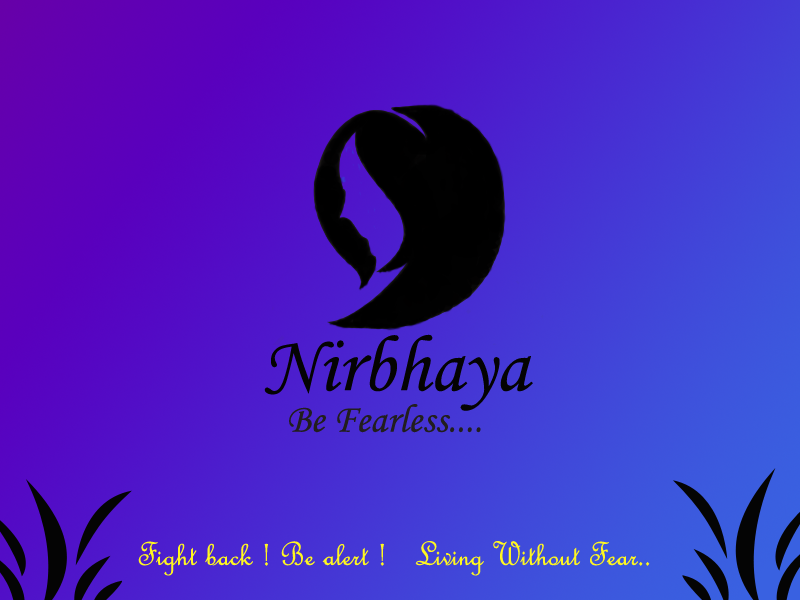
<style>
.page{position:relative;width:800px;height:600px}
.page>*{position:absolute;margin:0}
.t1{font:80px "MonotypeCorsiva";color:#040303}
.t2{font:40px "MonotypeCorsiva";color:#221e1e}
.t3{font:36px "FrenchScriptMT";color:#fff720}
</style>
<div class="page">
<p class="t1" style="left:264px;top:334px;width:269px;height:77px">Nirbhaya</p>
<p class="t2" style="left:289px;top:404px;width:192px;height:29px">Be Fearless....</p>
<p class="t3" style="left:138px;top:541px;width:512px;height:35px">Fight back ! Be alert !   Living Without Fear..</p>
</div>
